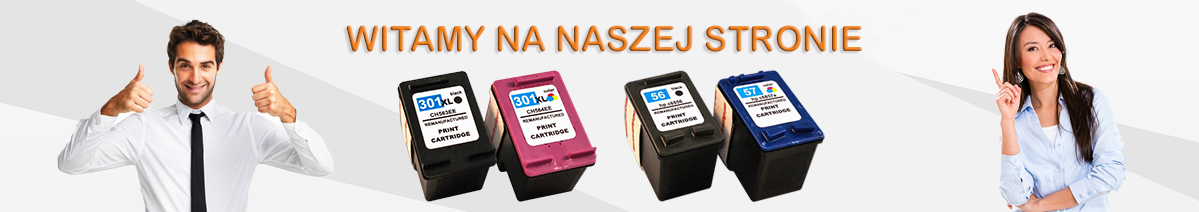
<style>
.page{position:relative;width:1199px;height:212px;background:#f2f2f2}
.page>*{position:absolute;margin:0}
.t1{font:35px "ArialRoundedMTBold"}
</style>
<div class="page">
<p class="t1" style="left:346px;top:25px;width:516px;height:27px">WITAMY NA NASZEJ STRONIE</p>
</div>
